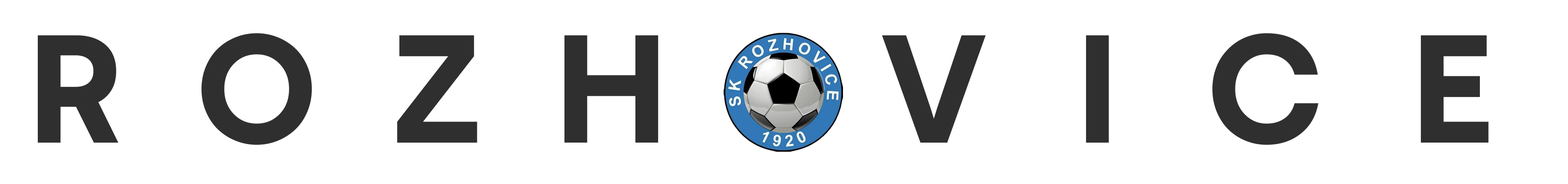
<style>
.page{position:relative;width:1568px;height:184px;background:#ffffff}
.page>*{position:absolute;margin:0}
.t1{font:153.7px "TripSans-Bold";letter-spacing:0.5em;color:#2f2f2f}
.t2{font:153.7px "TripSans-Bold";letter-spacing:0.6em;color:#2f2f2f}
</style>
<div class="page">
<p class="t1" style="left:37px;top:33px;width:622px;height:112px">ROZH</p>
<p class="t2" style="left:882px;top:33px;width:607px;height:112px">VICE</p>
</div>
